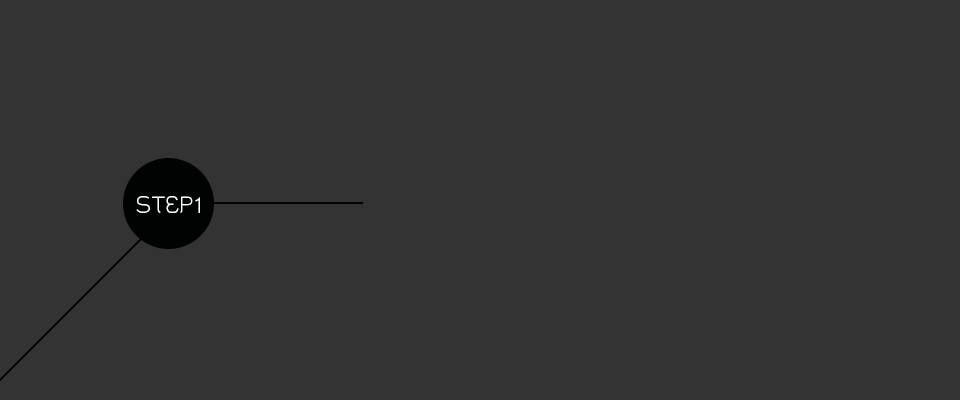
<style>
.page{position:relative;width:960px;height:400px;background:#333333}
.page>*{position:absolute;margin:0}
.t1{font:22.4px "Santor";letter-spacing:0.06em;color:#ffffff}
</style>
<div class="page">
<p class="t1" style="left:136px;top:196px;width:64px;height:17px">STEP1</p>
</div>
